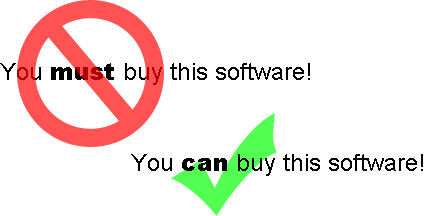
<style>
.page{position:relative;width:426px;height:216px;background:#ffffff}
.page>*{position:absolute;margin:0}
.t1{font:24px "ArialMT";color:#000000}
.t2{font:24px "Arial-Black";color:#000000}
</style>
<div class="page">
<p class="t1" style="left:0px;top:63px;width:310px;height:22px">You <span class="t2">must</span> buy this software!</p>
<p class="t1" style="left:131px;top:154px;width:292px;height:22px">You <span class="t2">can</span> buy this software!</p>
</div>
